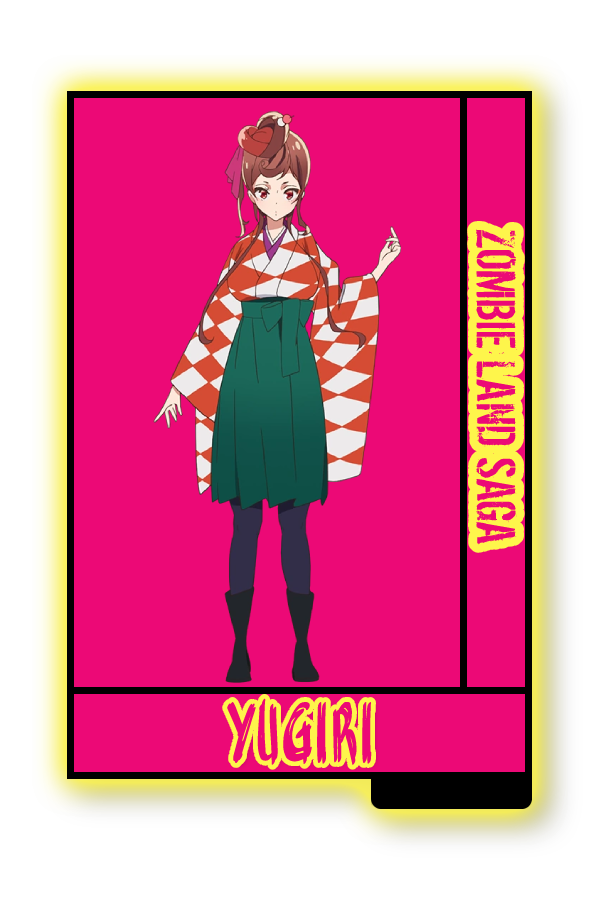
<style>
.page{position:relative;width:600px;height:900px;background:#ec0976}
.page>*{position:absolute;margin:0}
.t1{font:60.3px "DirtyEgo";color:#ec0976;scale:1.05 1}
.t2{font:72.2px "AnuDaw";color:#ec0976;scale:0.47 1}
</style>
<div class="page">
<p class="t1" style="left:476px;top:229px;width:41px;height:316px;rotate:90deg">ZOMBIE LAND SAGA</p>
<p class="t2" style="left:227px;top:698px;width:145px;height:68px">yugiri</p>
</div>
